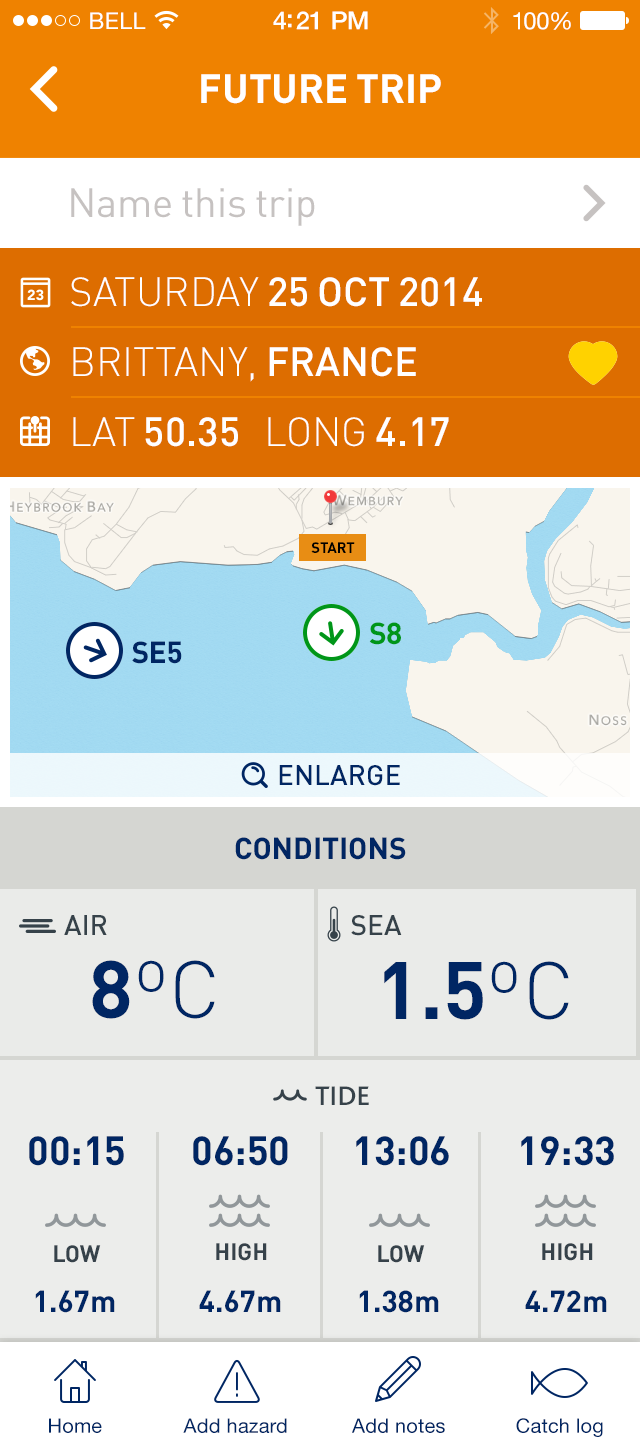
<style>
.page{position:relative;width:640px;height:1440px}
.page>*{position:absolute;margin:0}
.t1{font:23px "HelveticaNeue";letter-spacing:0.02em;color:#ffffff}
.t2{font:25px "HelveticaNeue-Medium";letter-spacing:-0.02em;color:#ffffff}
.t3{font:24px "HelveticaNeue";letter-spacing:-0.02em;color:#ffffff}
.t4{font:40px "DIN-Bold";color:#ffffff;text-transform:uppercase}
.t5{font:40px "DIN-Regular";color:#c6c2c1}
.t6{font:40px/70px "DIN-Medium";color:#ffffff;text-transform:uppercase}
.t7{font:40px/70px "DIN-Light";color:#ffffff;text-transform:uppercase}
.t8{font:15px "DIN-Bold";letter-spacing:-0.015em;color:#000000;text-transform:uppercase}
.t9{font:30px "DIN-Bold";letter-spacing:-0.015em;color:#009619;text-transform:uppercase}
.t10{font:30px "DIN-Bold";letter-spacing:-0.015em;color:#002663;text-transform:uppercase}
.t11{font:28px "DIN-Medium";color:#002663;text-transform:uppercase}
.t12{font:30px "DIN-Bold";color:#002663;text-transform:uppercase}
.t13{font:28px "DIN-Medium";color:#36424a;text-transform:uppercase}
.t14{font:80px "DIN-Light";color:#002663}
.t15{font:80px "DIN-Bold";color:#002663;text-transform:uppercase}
.t16{font:28px "Bliss2-Medium";color:#36424a;text-transform:uppercase}
.t17{font:40px "DIN-Bold";color:#002663;text-transform:uppercase}
.t18{font:23.2px "DIN-Bold";color:#36424a;text-transform:uppercase}
.t19{font:30px "DIN-Bold";color:#002663}
.t20{font:20px "HelveticaNeue";letter-spacing:0.01em;color:#002663}
</style>
<div class="page">
<p class="t1" style="left:90px;top:12px;width:56px;height:17px">BELL</p>
<p class="t2" style="left:273px;top:11px;width:95px;height:19px">4:21 PM</p>
<p class="t3" style="left:513px;top:12px;width:58px;height:18px">100%</p>
<p class="t4" style="left:201px;top:74px;width:240px;height:30px">Future trip</p>
<p class="t5" style="left:71px;top:188px;width:244px;height:38px">Name this trip</p>
<p class="t6" style="left:71px;top:277px;width:411px;height:170px"><span class="t7">Saturday </span>25 Oct 2014<br><span class="t7">Brittany, </span>France<br><span class="t7">LAT </span>50.35<span class="t7">   LONG </span>4.17</p>
<p class="t8" style="left:311px;top:542px;width:44px;height:11px">START</p>
<p class="t9" style="left:369px;top:622px;width:32px;height:23px">S8</p>
<p class="t10" style="left:132px;top:641px;width:50px;height:23px">SE5</p>
<p class="t11" style="left:279px;top:765px;width:121px;height:21px">enlarge</p>
<p class="t12" style="left:235px;top:837px;width:171px;height:23px">conditions</p>
<p class="t13" style="left:64px;top:915px;width:43px;height:20px">air</p>
<p class="t13" style="left:351px;top:915px;width:51px;height:21px">sea</p>
<p class="t14" style="left:92px;top:960px;width:123px;height:59px"><span class="t15">8</span>ºC</p>
<p class="t15" style="left:384px;top:961px;width:185px;height:59px">1.5<span class="t14">ºC</span></p>
<p class="t16" style="left:315px;top:1086px;width:54px;height:19px">tide</p>
<p class="t17" style="left:29px;top:1136px;width:95px;height:30px">00:15</p>
<p class="t17" style="left:193px;top:1136px;width:95px;height:30px">06:50</p>
<p class="t17" style="left:356px;top:1136px;width:93px;height:30px">13:06</p>
<p class="t17" style="left:521px;top:1136px;width:93px;height:30px">19:33</p>
<p class="t18" style="left:54px;top:1245px;width:47px;height:18px">LOW</p>
<p class="t18" style="left:216px;top:1243px;width:51px;height:18px">high</p>
<p class="t18" style="left:378px;top:1245px;width:47px;height:18px">LOW</p>
<p class="t18" style="left:542px;top:1243px;width:51px;height:18px">high</p>
<p class="t19" style="left:35px;top:1290px;width:80px;height:23px">1.67m</p>
<p class="t19" style="left:199px;top:1290px;width:82px;height:23px">4.67m</p>
<p class="t19" style="left:359px;top:1290px;width:80px;height:23px">1.38m</p>
<p class="t19" style="left:525px;top:1290px;width:82px;height:22px">4.72m</p>
<p class="t20" style="left:49px;top:1418px;width:53px;height:15px">Home</p>
<p class="t20" style="left:183px;top:1418px;width:104px;height:15px">Add hazard</p>
<p class="t20" style="left:352px;top:1418px;width:93px;height:15px">Add notes</p>
<p class="t20" style="left:516px;top:1418px;width:87px;height:19px">Catch log</p>
</div>
